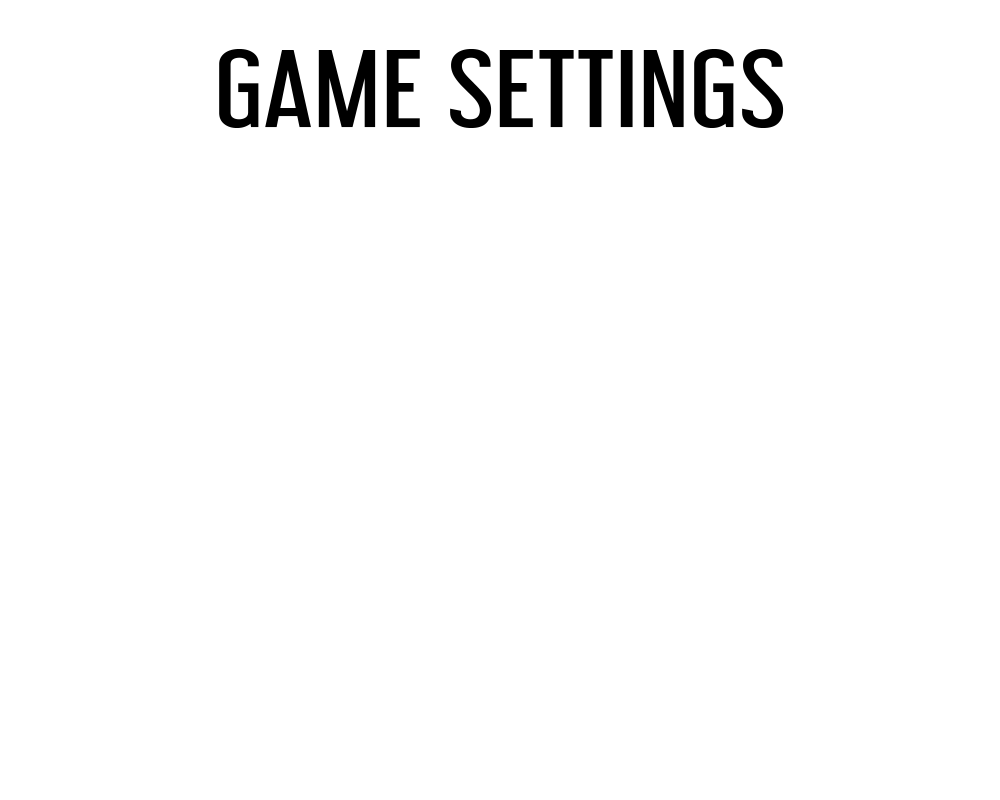
<style>
.page{position:relative;width:1000px;height:800px;background:#ffffff}
.page>*{position:absolute;margin:0}
.t1{font:98.1px "LibelSuitRg-Regular";color:#000000;scale:1.29 1}
</style>
<div class="page">
<p class="t1" style="left:219px;top:49px;width:565px;height:79px">GAME SETTINGS</p>
</div>
